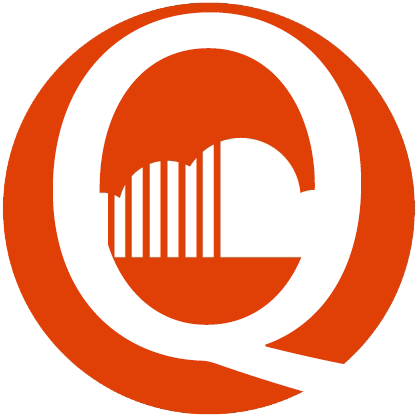
<style>
.page{position:relative;width:416px;height:416px;background:#ffffff}
.page>*{position:absolute;margin:0}
.t1{font:500px "MyriadPro-Regular";color:#ffffff}
</style>
<div class="page">
<p class="t1" style="left:53px;top:12px;width:311px;height:393px">Q</p>
</div>
